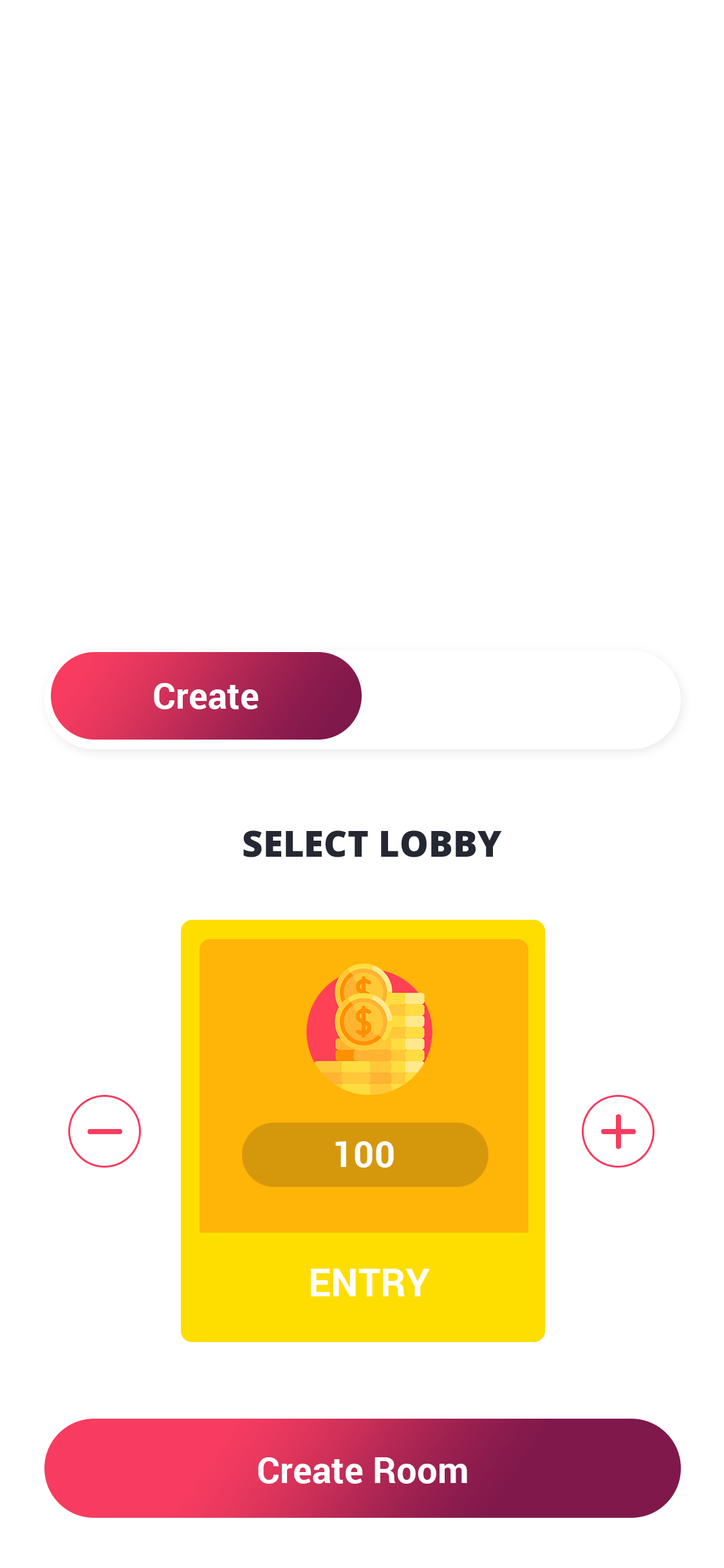
<style>
.page{position:relative;width:724px;height:1568px;background:#ffffff}
.page>*{position:absolute;margin:0}
.t1{font:36px "Roboto-Bold";letter-spacing:0.005em;color:#ffffff}
.t2{font:36px "OpenSans-Extrabold";letter-spacing:0.005em;color:#252832}
.t3{font:38.6px "Roboto-Bold";letter-spacing:0.005em;color:#ffffff;text-transform:uppercase}
</style>
<div class="page">
<p class="t1" style="left:154px;top:683px;width:105px;height:26px">Create</p>
<p class="t2" style="left:243px;top:830px;width:259px;height:27px">SELECT LOBBY</p>
<p class="t1" style="left:335px;top:1141px;width:59px;height:27px">100</p>
<p class="t3" style="left:311px;top:1269px;width:119px;height:27px">Entry</p>
<p class="t1" style="left:258px;top:1457px;width:209px;height:27px">Create Room</p>
</div>
